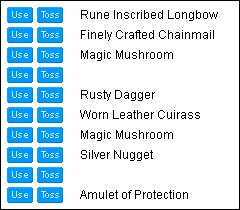
<style>
.page{position:relative;width:240px;height:210px;background:#ffffff}
.page>*{position:absolute;margin:0}
.t1{font:10px "ArialMT";color:#ccebff}
.t2{font:12px "ArialMT";color:#000000}
</style>
<div class="page">
<p class="t1" style="left:12px;top:11px;width:16px;height:7px">Use</p>
<p class="t1" style="left:41px;top:11px;width:18px;height:7px">Toss</p>
<p class="t2" style="left:81px;top:10px;width:137px;height:11px">Rune Inscribed Longbow</p>
<p class="t2" style="left:81px;top:30px;width:133px;height:11px">Finely Crafted Chainmail</p>
<p class="t1" style="left:12px;top:31px;width:16px;height:7px">Use</p>
<p class="t1" style="left:41px;top:31px;width:18px;height:7px">Toss</p>
<p class="t1" style="left:12px;top:51px;width:16px;height:7px">Use</p>
<p class="t1" style="left:41px;top:51px;width:18px;height:7px">Toss</p>
<p class="t2" style="left:81px;top:50px;width:92px;height:11px">Magic Mushroom</p>
<p class="t1" style="left:12px;top:71px;width:16px;height:7px">Use</p>
<p class="t1" style="left:41px;top:71px;width:18px;height:7px">Toss</p>
<p class="t1" style="left:12px;top:91px;width:16px;height:7px">Use</p>
<p class="t1" style="left:41px;top:91px;width:18px;height:7px">Toss</p>
<p class="t2" style="left:81px;top:90px;width:74px;height:11px">Rusty Dagger</p>
<p class="t1" style="left:12px;top:111px;width:16px;height:7px">Use</p>
<p class="t1" style="left:41px;top:111px;width:18px;height:7px">Toss</p>
<p class="t2" style="left:80px;top:110px;width:120px;height:9px">Worn Leather Cuirass</p>
<p class="t1" style="left:12px;top:131px;width:16px;height:7px">Use</p>
<p class="t1" style="left:41px;top:131px;width:18px;height:7px">Toss</p>
<p class="t2" style="left:81px;top:130px;width:92px;height:11px">Magic Mushroom</p>
<p class="t2" style="left:81px;top:150px;width:72px;height:11px">Silver Nugget</p>
<p class="t1" style="left:12px;top:151px;width:16px;height:7px">Use</p>
<p class="t1" style="left:41px;top:151px;width:18px;height:7px">Toss</p>
<p class="t1" style="left:12px;top:171px;width:16px;height:7px">Use</p>
<p class="t1" style="left:41px;top:171px;width:18px;height:7px">Toss</p>
<p class="t1" style="left:12px;top:191px;width:16px;height:7px">Use</p>
<p class="t1" style="left:41px;top:191px;width:18px;height:7px">Toss</p>
<p class="t2" style="left:80px;top:190px;width:108px;height:9px">Amulet of Protection</p>
</div>
